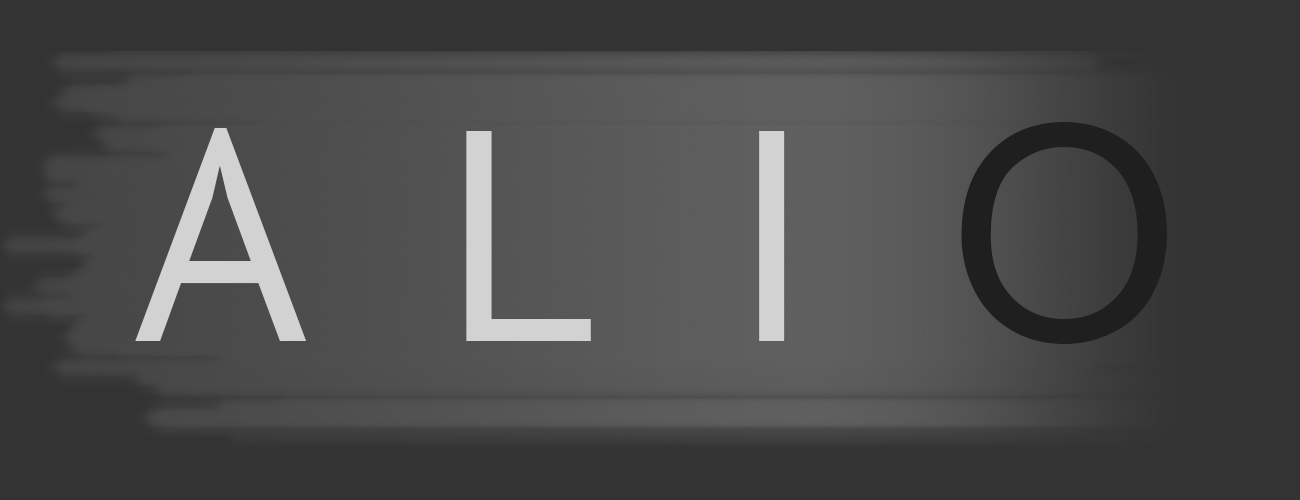
<style>
.page{position:relative;width:1300px;height:500px;background:#333333}
.page>*{position:absolute;margin:0}
.t1{font:300px "PTSans-Regular";letter-spacing:0.44em;color:#d2d2d2}
.t2{font:300px "ArialMT";letter-spacing:0.44em;color:#1f1f1f}
</style>
<div class="page">
<p class="t1" style="left:135px;top:122px;width:1032px;height:222px">ALI<span class="t2">O</span></p>
</div>
